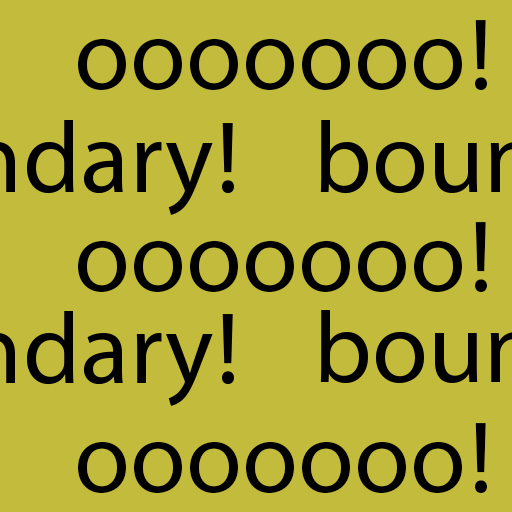
<style>
.page{position:relative;width:512px;height:512px;background:#c3bb3b}
.page>*{position:absolute;margin:0}
.t1{font:102px "MyriadHebrew-Regular";color:#000000}
</style>
<div class="page">
<p class="t1" style="left:78px;top:20px;width:409px;height:71px">ooooooo!</p>
<p class="t1" style="left:78px;top:222px;width:409px;height:71px">ooooooo!</p>
<p class="t1" style="left:78px;top:423px;width:409px;height:71px">ooooooo!</p>
</div>
